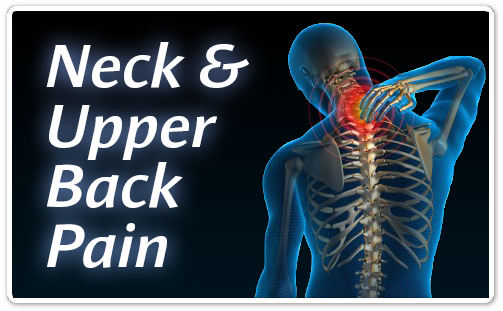
<style>
.page{position:relative;width:503px;height:311px}
.page>*{position:absolute;margin:0}
.t1{font:60px/60px "Impara-MediumItalic";letter-spacing:0.025em;color:#ffffff}
</style>
<div class="page">
<p class="t1" style="left:46px;top:42px;width:203px;height:226px">Neck &amp; Upper Back<br>Pain</p>
</div>
